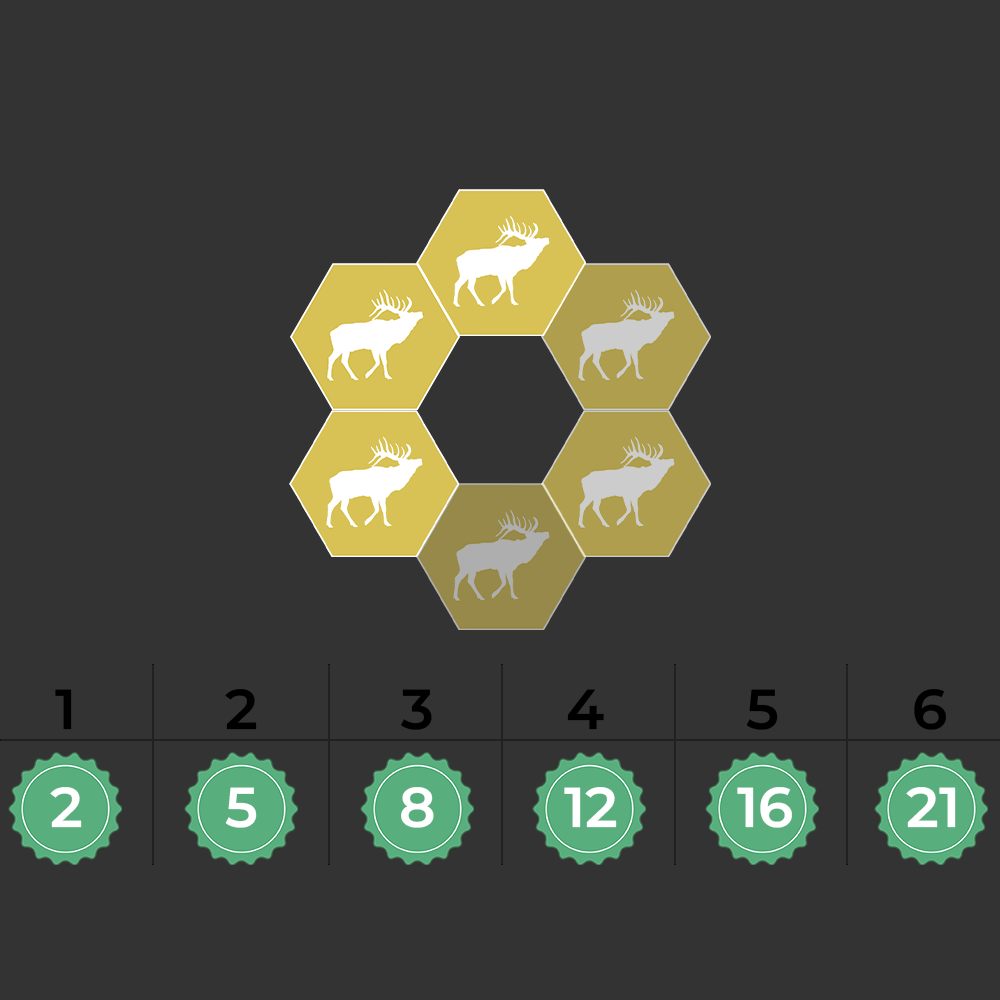
<style>
.page{position:relative;width:1000px;height:1000px;background:#333333}
.page>*{position:absolute;margin:0}
.t1{font:56.2px "MontserratRoman-SemiBold";color:#000000}
.t2{font:56.2px "MontserratRoman-SemiBold";color:#ffffff}
</style>
<div class="page">
<p class="t1" style="left:55px;top:689px;width:17px;height:41px">1</p>
<p class="t1" style="left:225px;top:689px;width:32px;height:41px">2</p>
<p class="t1" style="left:401px;top:689px;width:31px;height:41px">3</p>
<p class="t1" style="left:567px;top:689px;width:37px;height:41px">4</p>
<p class="t1" style="left:746px;top:689px;width:32px;height:41px">5</p>
<p class="t1" style="left:914px;top:689px;width:32px;height:41px">6</p>
<p class="t2" style="left:50px;top:787px;width:32px;height:41px">2</p>
<p class="t2" style="left:225px;top:787px;width:32px;height:41px">5</p>
<p class="t2" style="left:401px;top:787px;width:33px;height:41px">8</p>
<p class="t2" style="left:564px;top:787px;width:53px;height:41px">12</p>
<p class="t2" style="left:737px;top:787px;width:55px;height:41px">16</p>
<p class="t2" style="left:906px;top:787px;width:50px;height:41px">21</p>
</div>
